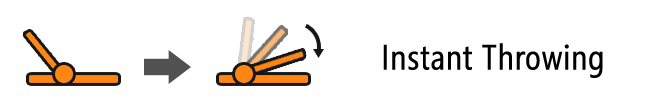
<style>
.page{position:relative;width:660px;height:112px;background:#ffffff}
.page>*{position:absolute;margin:0}
.t1{font:35px "SegoeCondensed";color:#000000;font-weight:bold}
</style>
<div class="page">
<p class="t1" style="left:383px;top:43px;width:220px;height:35px">Instant Throwing</p>
</div>
